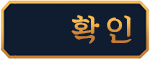
<style>
.page{position:relative;width:150px;height:59px;background:#101d31}
.page>*{position:absolute;margin:0}
.t1{font:31px "SDKukdetopokki-aLt";letter-spacing:0.16em}
</style>
<div class="page">
<p class="t1" style="left:71px;top:15px;width:61px;height:29px">확인</p>
</div>
